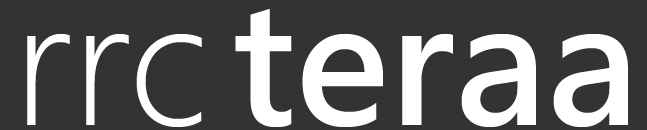
<style>
.page{position:relative;width:647px;height:130px;background:#333333}
.page>*{position:absolute;margin:0}
.t1{font:165px "MicrosoftJhengHeiBold";color:#ffffff}
.t2{font:165px "MicrosoftJhengHeiLight";color:#ffffff}
</style>
<div class="page">
<p class="t1" style="left:235px;top:9px;width:393px;height:118px">teraa</p>
<p class="t2" style="left:27px;top:34px;width:175px;height:93px">rrc</p>
</div>
